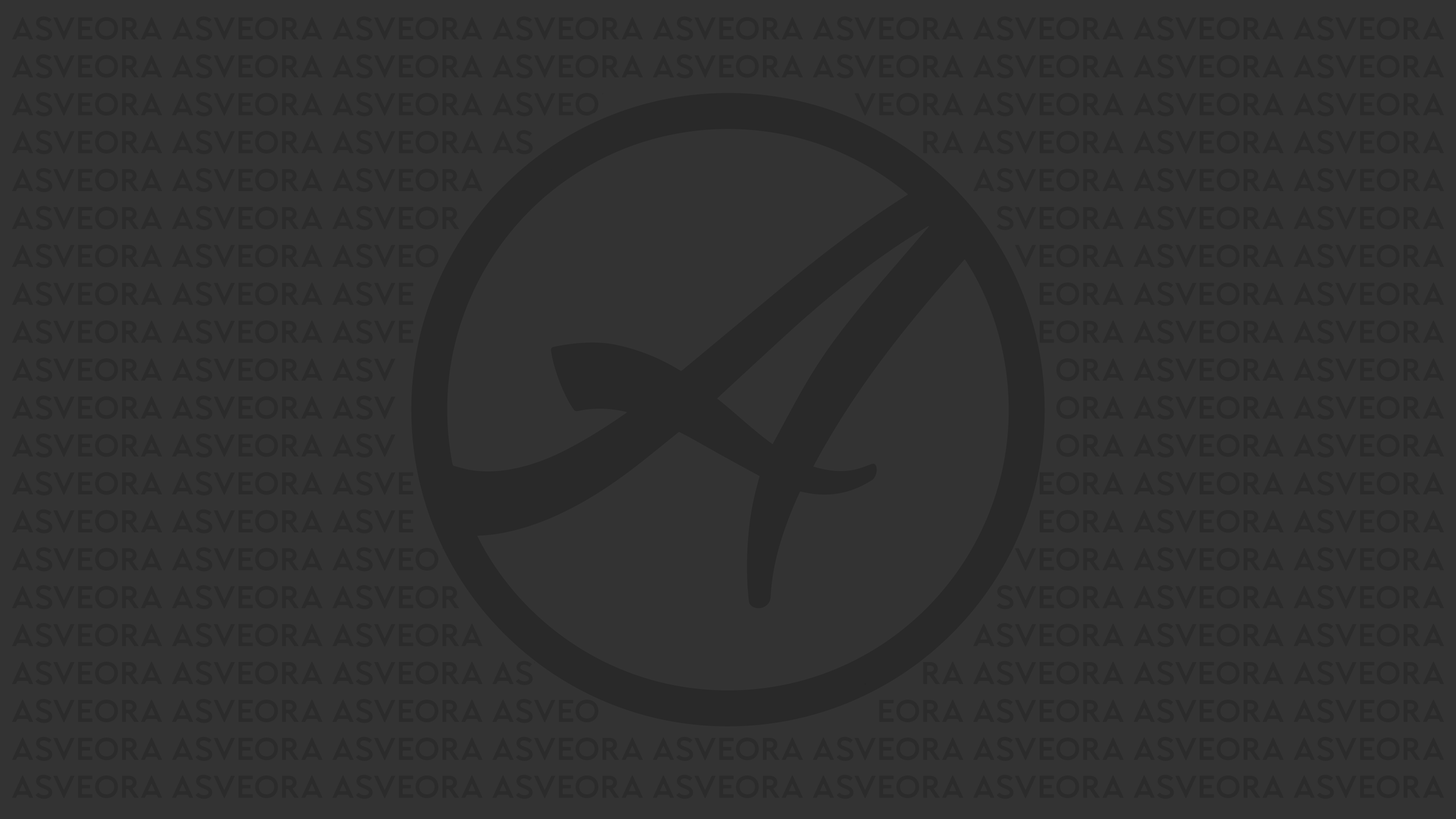
<style>
.page{position:relative;width:1456px;height:819px;background:#333333}
.page>*{position:absolute;margin:0}
.t1{font:31.6px "LequireDEMO";color:#2b2b2b}
</style>
<div class="page">
<p class="t1" style="left:12px;top:16px;width:1432px;height:783px;text-align:center">ASVEORA ASVEORA ASVEORA ASVEORA ASVEORA ASVEORA ASVEORA ASVEORA ASVEORA<br>ASVEORA ASVEORA ASVEORA ASVEORA ASVEORA ASVEORA ASVEORA ASVEORA ASVEORA<br>ASVEORA ASVEORA ASVEORA ASVEORA ASVEORA ASVEORA ASVEORA ASVEORA ASVEORA<br>ASVEORA ASVEORA ASVEORA ASVEORA ASVEORA ASVEORA ASVEORA ASVEORA ASVEORA<br>ASVEORA ASVEORA ASVEORA ASVEORA ASVEORA ASVEORA ASVEORA ASVEORA ASVEORA<br>ASVEORA ASVEORA ASVEORA ASVEORA ASVEORA ASVEORA ASVEORA ASVEORA ASVEORA<br>ASVEORA ASVEORA ASVEORA ASVEORA ASVEORA ASVEORA ASVEORA ASVEORA ASVEORA<br>ASVEORA ASVEORA ASVEORA ASVEORA ASVEORA ASVEORA ASVEORA ASVEORA ASVEORA<br>ASVEORA ASVEORA ASVEORA ASVEORA ASVEORA ASVEORA ASVEORA ASVEORA ASVEORA<br>ASVEORA ASVEORA ASVEORA ASVEORA ASVEORA ASVEORA ASVEORA ASVEORA ASVEORA<br>ASVEORA ASVEORA ASVEORA ASVEORA ASVEORA ASVEORA ASVEORA ASVEORA ASVEORA<br>ASVEORA ASVEORA ASVEORA ASVEORA ASVEORA ASVEORA ASVEORA ASVEORA ASVEORA<br>ASVEORA ASVEORA ASVEORA ASVEORA ASVEORA ASVEORA ASVEORA ASVEORA ASVEORA<br>ASVEORA ASVEORA ASVEORA ASVEORA ASVEORA ASVEORA ASVEORA ASVEORA ASVEORA<br>ASVEORA ASVEORA ASVEORA ASVEORA ASVEORA ASVEORA ASVEORA ASVEORA ASVEORA<br>ASVEORA ASVEORA ASVEORA ASVEORA ASVEORA ASVEORA ASVEORA ASVEORA ASVEORA<br>ASVEORA ASVEORA ASVEORA ASVEORA ASVEORA ASVEORA ASVEORA ASVEORA ASVEORA<br>ASVEORA ASVEORA ASVEORA ASVEORA ASVEORA ASVEORA ASVEORA ASVEORA ASVEORA<br>ASVEORA ASVEORA ASVEORA ASVEORA ASVEORA ASVEORA ASVEORA ASVEORA ASVEORA<br>ASVEORA ASVEORA ASVEORA ASVEORA ASVEORA ASVEORA ASVEORA ASVEORA ASVEORA<br>ASVEORA ASVEORA ASVEORA ASVEORA ASVEORA ASVEORA ASVEORA ASVEORA ASVEORA</p>
</div>
